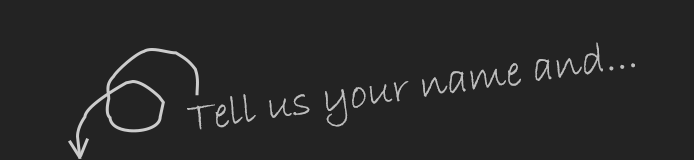
<style>
.page{position:relative;width:694px;height:160px;background:#232323}
.page>*{position:absolute;margin:0}
.t1{font:44px "BradleyHandITC";color:#bdbdbd}
</style>
<div class="page">
<p class="t1" style="left:187px;top:42px;width:448px;height:88px;rotate:-8deg">Tell us your name and...</p>
</div>
